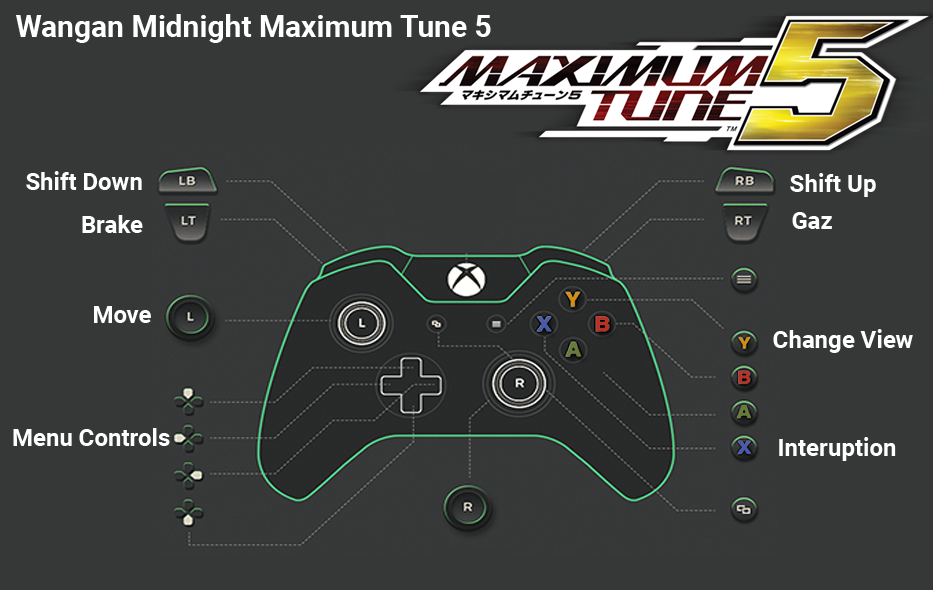
<style>
.page{position:relative;width:933px;height:590px;background:#363838}
.page>*{position:absolute;margin:0}
.t1{font:30px "Roboto-Bold";color:#ffffff}
.t2{font:24px "Roboto-Bold";color:#ffffff}
</style>
<div class="page">
<p class="t1" style="left:16px;top:14px;width:475px;height:29px">Wangan Midnight Maximum Tune 5</p>
<p class="t2" style="left:26px;top:171px;width:116px;height:19px">Shift Down</p>
<p class="t2" style="left:790px;top:173px;width:86px;height:24px">Shift Up</p>
<p class="t2" style="left:82px;top:215px;width:61px;height:18px">Brake</p>
<p class="t2" style="left:792px;top:212px;width:40px;height:17px">Gaz</p>
<p class="t2" style="left:94px;top:306px;width:57px;height:17px">Move</p>
<p class="t2" style="left:773px;top:329px;width:140px;height:24px">Change View</p>
<p class="t2" style="left:13px;top:428px;width:157px;height:18px">Menu Controls</p>
<p class="t2" style="left:779px;top:437px;width:117px;height:24px">Interuption</p>
</div>
